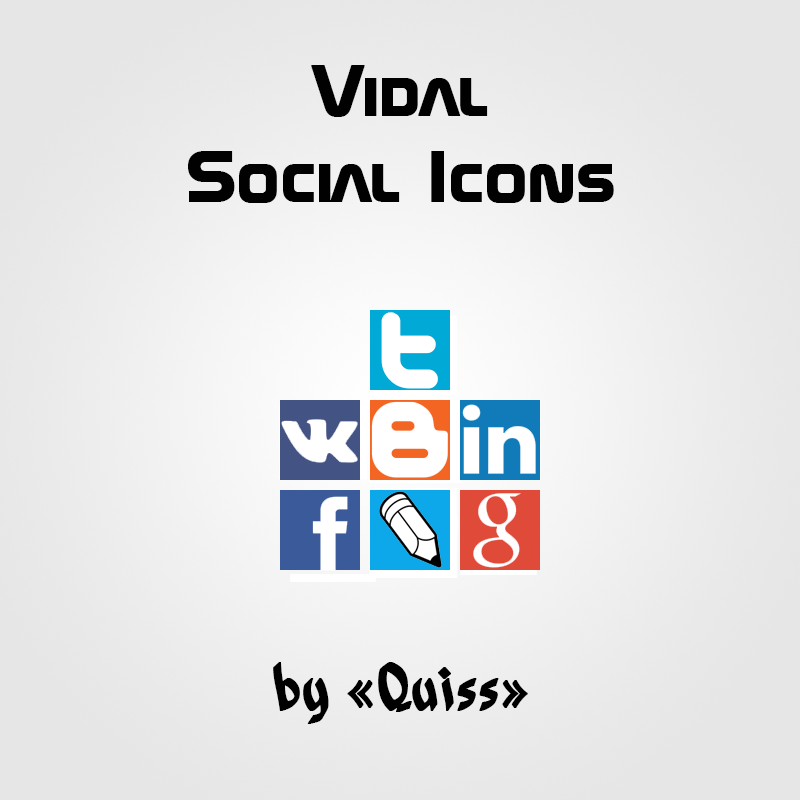
<style>
.page{position:relative;width:800px;height:800px}
.page>*{position:absolute;margin:0}
.t1{font:72px "SpaceBT-Bold";color:#010101;font-weight:bold}
.t2{font:72px "PersiaBT-Regular";color:#000000;font-weight:bold}
</style>
<div class="page">
<p class="t1" style="left:188px;top:65px;width:426px;height:138px;text-align:center">Vidal<br>Social Icons</p>
<p class="t2" style="left:273px;top:662px;width:255px;height:62px">by «Quiss»</p>
</div>
